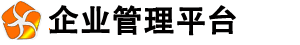
<style>
.page{position:relative;width:300px;height:45px;background:#ffffff}
.page>*{position:absolute;margin:0}
.t1{font:31px "AdobeHeitiStd-Regular";color:#010000;font-weight:bold}
</style>
<div class="page">
<p class="t1" style="left:49px;top:5px;width:187px;height:31px">企业管理平台</p>
</div>
